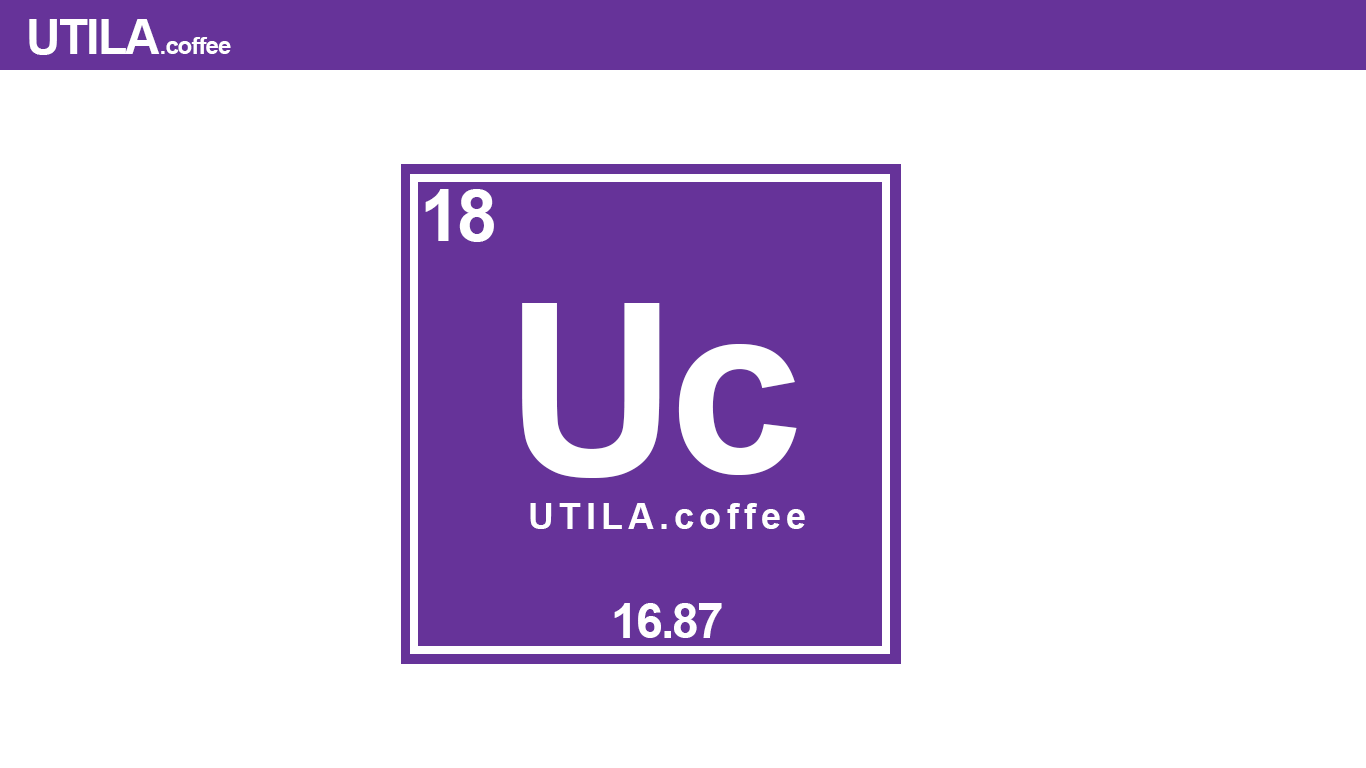
<style>
.page{position:relative;width:1366px;height:768px;background:#ffffff}
.page>*{position:absolute;margin:0}
.t1{font:48px "Arial-BoldMT";letter-spacing:-0.04em;color:#ffffff}
.t2{font:24px "Arial-BoldMT";letter-spacing:-0.04em;color:#ffffff}
.t3{font:72px "Arial-BoldMT";letter-spacing:-0.04em;color:#ffffff}
.t4{font:240px "Arial-BoldMT";letter-spacing:-0.04em;color:#ffffff}
.t5{font:36px "Arial-BoldMT";letter-spacing:0.14em;color:#ffffff}
</style>
<div class="page">
<p class="t1" style="left:29px;top:19px;width:131px;height:36px">UTILA</p>
<p class="t2" style="left:161px;top:37px;width:70px;height:17px">.coffee</p>
<p class="t3" style="left:425px;top:189px;width:69px;height:53px">18</p>
<p class="t4" style="left:522px;top:303px;width:138px;height:175px">U</p>
<p class="t4" style="left:678px;top:344px;width:119px;height:131px">c</p>
<p class="t5" style="left:530px;top:503px;width:275px;height:26px">UTILA.coffee</p>
<p class="t1" style="left:614px;top:603px;width:108px;height:35px">16.87</p>
</div>
